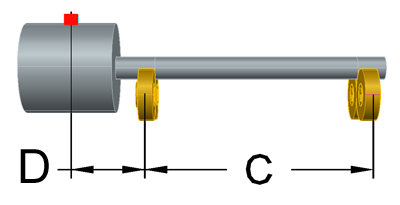
<style>
.page{position:relative;width:400px;height:205px;background:#ffffff}
.page>*{position:absolute;margin:0}
.t1{font:47.1px "ArialMT";color:#000000}
</style>
<div class="page">
<p class="t1" style="left:20px;top:149px;width:29px;height:34px">D</p>
</div>
